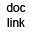
<style>
.page{position:relative;width:32px;height:32px;background:#ffffff}
.page>*{position:absolute;margin:0}
.t1{font:11.8px "ArialMT";color:#000000}
</style>
<div class="page">
<p class="t1" style="left:6px;top:3px;width:20px;height:24px;text-align:center">doc<br>link</p>
</div>
